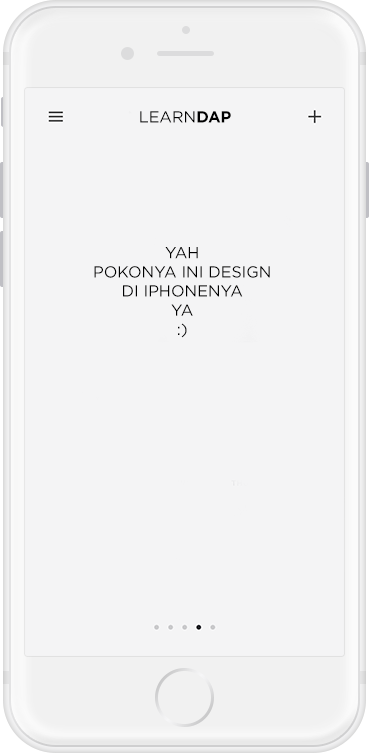
<style>
.page{position:relative;width:369px;height:753px;background:#f4f4f5}
.page>*{position:absolute;margin:0}
.t1{font:16px "Gotham-Book";color:#000000}
.t2{font:16px "Gotham-Bold";color:#000000}
</style>
<div class="page">
<p class="t1" style="left:140px;top:111px;width:91px;height:12px">LEARN<span class="t2">DAP</span></p>
<p class="t1" style="left:94px;top:247px;width:176px;height:91px;text-align:center">YAH <br>POKONYA INI DESIGN<br>DI IPHONENYA<br>YA<br>:)</p>
</div>
